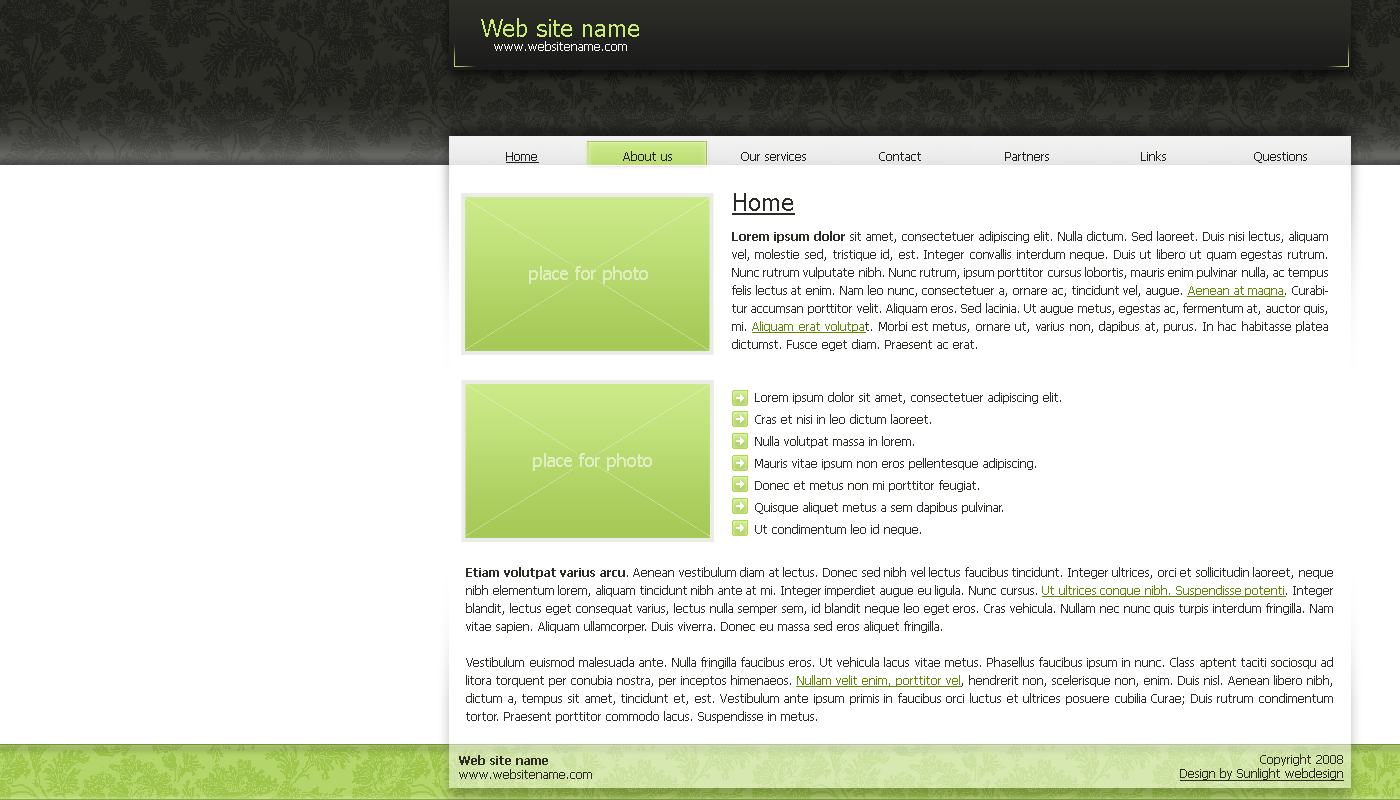
<style>
.page{position:relative;width:1400px;height:800px;background:#ffffff}
.page>*{position:absolute;margin:0}
.t1{font:24px "Tahoma";color:#caec72}
.t2{font:12px "Tahoma";color:#ffffff}
.t3{font:12px "Tahoma";color:#1f1f1b;text-decoration:underline}
.t4{font:12px "Tahoma";color:#1f1f1b}
.t5{font:24px "Tahoma";color:#2c2c27;text-decoration:underline}
.t6{font:12px/18px "Tahoma";color:#2c2c27}
.t7{font:12px/18px "Tahoma-Bold";color:#2c2c27}
.t8{font:12px/18px "Tahoma";color:#5e8705;text-decoration:underline}
.t9{font:18px "Tahoma";color:#deedbb}
.t10{font:12px/22px "Tahoma";color:#2c2c27}
.t11{font:18px "Tahoma";color:#dfeebe}
.t12{font:12px "Tahoma";color:#2c2c27}
.t13{font:12px "Tahoma-Bold";color:#2c2c27}
.t14{font:12px "Tahoma";color:#2c2c27;text-decoration:underline}
</style>
<div class="page">
<p class="t1" style="left:481px;top:18px;width:158px;height:19px">Web site name</p>
<p class="t2" style="left:494px;top:41px;width:133px;height:10px">www.websitename.com</p>
<p class="t3" style="left:506px;top:152px;width:33px;height:11px">Home</p>
<p class="t4" style="left:623px;top:151px;width:49px;height:10px">About us</p>
<p class="t4" style="left:741px;top:152px;width:65px;height:9px">Our services</p>
<p class="t4" style="left:879px;top:152px;width:42px;height:9px">Contact</p>
<p class="t4" style="left:1005px;top:152px;width:44px;height:9px">Partners</p>
<p class="t4" style="left:1141px;top:151px;width:25px;height:10px">Links</p>
<p class="t4" style="left:1254px;top:152px;width:53px;height:11px">Questions</p>
<p class="t5" style="left:732px;top:193px;width:63px;height:22px">Home</p>
<p class="t6" style="left:732px;top:231px;width:596px;height:120px;text-align:justify"><span class="t7">Lorem ipsum dolor</span> sit amet, consectetuer adipiscing elit. Nulla dictum. Sed laoreet. Duis nisi lectus, aliquam vel, molestie sed, tristique id, est. Integer convallis interdum neque. Duis ut libero ut quam egestas rutrum. Nunc rutrum vulputate nibh. Nunc rutrum, ipsum porttitor cursus lobortis, mauris enim pulvinar nulla, ac tempus felis lectus at enim. Nam leo nunc, consectetuer a, ornare ac, tincidunt vel, augue. <span class="t8">Aenean at magna</span>. Curabitur accumsan porttitor velit. Aliquam eros. Sed lacinia. Ut augue metus, egestas ac, fermentum at, auctor quis, mi. <span class="t8">Aliquam erat volutpa</span>t. Morbi est metus, ornare ut, varius non, dapibus at, purus. In hac habitasse platea dictumst. Fusce eget diam. Praesent ac erat.</p>
<p class="t9" style="left:529px;top:266px;width:119px;height:18px">place for photo</p>
<p class="t10" style="left:755px;top:392px;width:306px;height:144px">Lorem ipsum dolor sit amet, consectetuer adipiscing elit.<br>    Cras et nisi in leo dictum laoreet.<br>    Nulla volutpat massa in lorem.<br>    Mauris vitae ipsum non eros pellentesque adipiscing.<br>    Donec et metus non mi porttitor feugiat.<br>    Quisque aliquet metus a sem dapibus pulvinar.<br>    Ut condimentum leo id neque.</p>
<p class="t11" style="left:533px;top:453px;width:119px;height:18px">place for photo</p>
<p class="t6" style="left:466px;top:567px;width:867px;height:156px;text-align:justify"><span class="t7">Etiam volutpat varius arcu</span>. Aenean vestibulum diam at lectus. Donec sed nibh vel lectus faucibus tincidunt. Integer ultrices, orci et sollicitudin laoreet, neque nibh elementum lorem, aliquam tincidunt nibh ante at mi. Integer imperdiet augue eu ligula. Nunc cursus. <span class="t8">Ut ultrices congue nibh. Suspendisse potenti</span>. Integer blandit, lectus eget consequat varius, lectus nulla semper sem, id blandit neque leo eget eros. Cras vehicula. Nullam nec nunc quis turpis interdum fringilla. Nam vitae sapien. Aliquam ullamcorper. Duis viverra. Donec eu massa sed eros aliquet fringilla.<br><br>Vestibulum euismod malesuada ante. Nulla fringilla faucibus eros. Ut vehicula lacus vitae metus. Phasellus faucibus ipsum in nunc. Class aptent taciti sociosqu ad litora torquent per conubia nostra, per inceptos himenaeos. <span class="t8">Nullam velit enim, porttitor vel</span>, hendrerit non, scelerisque non, enim. Duis nisl. Aenean libero nibh, dictum a, tempus sit amet, tincidunt et, est. Vestibulum ante ipsum primis in faucibus orci luctus et ultrices posuere cubilia Curae; Duis rutrum condimentum tortor. Praesent porttitor commodo lacus. Suspendisse in metus.</p>
<p class="t12" style="left:459px;top:755px;width:133px;height:24px;text-align:justify"><span class="t13">Web site name<br></span>www.websitename.com</p>
<p class="t14" style="left:1180px;top:754px;width:164px;height:27px;text-align:right"><span class="t12">Copyright 2008<br></span>Design by Sunlight webdesign</p>
</div>
